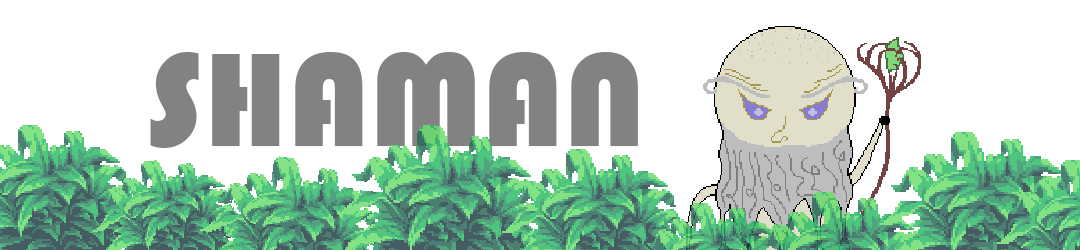
<style>
.page{position:relative;width:1080px;height:250px;background:#ffffff}
.page>*{position:absolute;margin:0}
.t1{font:138px "Bauhaus93";color:#828282}
</style>
<div class="page">
<p class="t1" style="left:150px;top:52px;width:488px;height:96px">SHAMAN</p>
</div>
